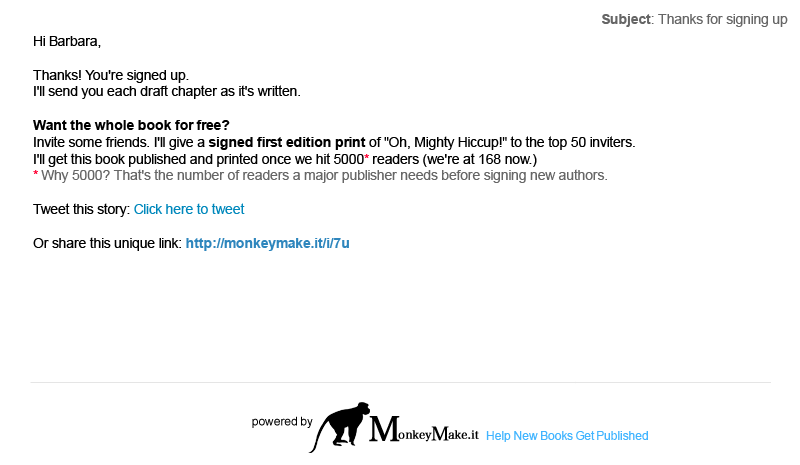
<style>
.page{position:relative;width:800px;height:465px;background:#ffffff}
.page>*{position:absolute;margin:0}
.t1{font:14px "ArialMT";letter-spacing:-0.025em;color:#666666}
.t2{font:14px "Arial-BoldMT";letter-spacing:-0.025em;color:#666666}
.t3{font:14px "ArialMT";letter-spacing:-0.025em;color:#000000}
.t4{font:14px "Arial-BoldMT";letter-spacing:-0.025em;color:#000000}
.t5{font:14px "ArialMT";letter-spacing:-0.025em;color:#ff0033}
.t6{font:14px "ArialMT";letter-spacing:-0.025em;color:#0088bc}
.t7{font:14px "Arial-BoldMT";letter-spacing:-0.025em;color:#2e86bd}
.t8{font:12px "ArialMT";letter-spacing:-0.025em;color:#000000}
.t9{font:34.2px "HiraMinPro-W3";color:#000000;font-weight:bold}
.t10{font:11.4px "HiraMinPro-W3";color:#000000;font-weight:bold}
.t11{font:19.1px "HiraMinPro-W3";color:#000000;font-weight:bold}
.t12{font:12px "ArialMT";letter-spacing:-0.025em;color:#42b5ff}
</style>
<div class="page">
<p class="t1" style="left:602px;top:14px;width:186px;height:13px"><span class="t2">Subject</span>: Thanks for signing up</p>
<p class="t3" style="left:33px;top:36px;width:602px;height:215px">Hi Barbara,<br><br>Thanks! You're signed up.<br>I'll send you each draft chapter as it's written.<br><br><span class="t4">Want the whole book for free?<br></span>Invite some friends. I'll give a <span class="t4">signed first edition print</span> of "Oh, Mighty Hiccup!" to the top 50 inviters.<br>I'll get this book published and printed once we hit 5000<span class="t5">*</span> readers (we're at 168 now.)<br><span class="t5">* </span><span class="t1">Why 5000? That's the number of readers a major publisher needs before signing new authors.<br></span><br>Tweet this story: <span class="t6">Click here to tweet <br></span><br>Or share this unique link: <span class="t7">http://monkeymake.it/i/7u</span></p>
<p class="t8" style="left:252px;top:416px;width:61px;height:12px">powered by</p>
<p class="t9" style="left:369px;top:416px;width:31px;height:26px">M</p>
<p class="t10" style="left:398px;top:430px;width:34px;height:12px">onkey</p>
<p class="t11" style="left:431px;top:426px;width:18px;height:15px">M</p>
<p class="t10" style="left:448px;top:430px;width:31px;height:9px">ake.it</p>
<p class="t12" style="left:486px;top:431px;width:162px;height:11px">Help New Books Get Published</p>
</div>
